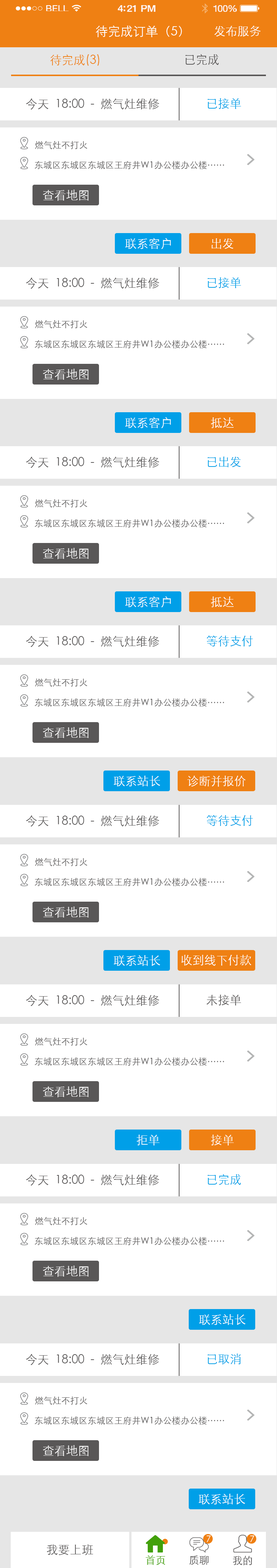
<style>
.page{position:relative;width:277px;height:1568px;background:#ffffff}
.page>*{position:absolute;margin:0}
.t1{font:8.6px "HelveticaNeue";letter-spacing:0.02em;color:#ffffff;scale:1.06 1}
.t2{font:9.3px "HelveticaNeue-Medium";letter-spacing:-0.02em;color:#ffffff;scale:1.06 1}
.t3{font:9px "HelveticaNeue";letter-spacing:-0.02em;color:#ffffff;scale:1.06 1}
.t4{font:12.6px "STXihei";color:#ffffff}
.t5{font:11.8px "STXihei";color:#ffffff}
.t6{font:11.8px "STXihei";color:#595757}
.t7{font:11.8px "STXihei";color:#ef8014}
.t8{font:11.8px "STXihei";color:#009fe8}
.t9{font:8.9px "STXihei";color:#595757}
.t10{font:8.9px "STXihei";color:#ffffff}
.t11{font:10.3px "STXihei";color:#42a00a}
.t12{font:10.3px "STXihei";color:#595757}
</style>
<div class="page">
<p class="t1" style="left:46px;top:5px;width:23px;height:6px">BELL</p>
<p class="t2" style="left:118px;top:5px;width:38px;height:7px">4:21 PM</p>
<p class="t3" style="left:213px;top:5px;width:24px;height:7px">100%</p>
<p class="t4" style="left:96px;top:25px;width:86px;height:12px">待完成订单（5）</p>
<p class="t5" style="left:214px;top:25px;width:47px;height:12px">发布服务</p>
<p class="t6" style="left:185px;top:54px;width:34px;height:11px">已完成</p>
<p class="t7" style="left:50px;top:54px;width:49px;height:12px">待完成(3)</p>
<p class="t6" style="left:26px;top:98px;width:133px;height:12px">今天  18:00  -  燃气灶维修</p>
<p class="t8" style="left:208px;top:98px;width:33px;height:11px">已接单</p>
<p class="t9" style="left:35px;top:141px;width:52px;height:8px">燃气灶不打火</p>
<p class="t9" style="left:35px;top:161px;width:189px;height:8px">东城区东城区东城区王府井W1办公楼办公楼……</p>
<p class="t5" style="left:43px;top:189px;width:46px;height:12px">查看地图</p>
<p class="t5" style="left:125px;top:238px;width:46px;height:11px">联系客户</p>
<p class="t5" style="left:212px;top:238px;width:21px;height:11px">出发</p>
<p class="t6" style="left:26px;top:277px;width:133px;height:12px">今天  18:00  -  燃气灶维修</p>
<p class="t8" style="left:208px;top:277px;width:33px;height:11px">已接单</p>
<p class="t9" style="left:35px;top:320px;width:52px;height:8px">燃气灶不打火</p>
<p class="t9" style="left:35px;top:340px;width:189px;height:8px">东城区东城区东城区王府井W1办公楼办公楼……</p>
<p class="t5" style="left:43px;top:369px;width:46px;height:11px">查看地图</p>
<p class="t5" style="left:125px;top:417px;width:46px;height:11px">联系客户</p>
<p class="t5" style="left:211px;top:417px;width:23px;height:11px">抵达</p>
<p class="t6" style="left:26px;top:457px;width:133px;height:11px">今天  18:00  -  燃气灶维修</p>
<p class="t8" style="left:208px;top:457px;width:33px;height:10px">已出发</p>
<p class="t9" style="left:35px;top:499px;width:52px;height:9px">燃气灶不打火</p>
<p class="t9" style="left:35px;top:519px;width:189px;height:8px">东城区东城区东城区王府井W1办公楼办公楼……</p>
<p class="t5" style="left:43px;top:548px;width:46px;height:11px">查看地图</p>
<p class="t5" style="left:125px;top:596px;width:46px;height:12px">联系客户</p>
<p class="t5" style="left:211px;top:597px;width:23px;height:10px">抵达</p>
<p class="t6" style="left:26px;top:636px;width:133px;height:11px">今天  18:00  -  燃气灶维修</p>
<p class="t8" style="left:206px;top:635px;width:47px;height:11px">等待支付</p>
<p class="t9" style="left:35px;top:678px;width:52px;height:9px">燃气灶不打火</p>
<p class="t9" style="left:35px;top:698px;width:189px;height:9px">东城区东城区东城区王府井W1办公楼办公楼……</p>
<p class="t5" style="left:43px;top:727px;width:46px;height:11px">查看地图</p>
<p class="t5" style="left:114px;top:776px;width:46px;height:10px">联系站长</p>
<p class="t5" style="left:187px;top:776px;width:59px;height:11px">诊断并报价</p>
<p class="t6" style="left:26px;top:815px;width:133px;height:12px">今天  18:00  -  燃气灶维修</p>
<p class="t8" style="left:206px;top:815px;width:47px;height:11px">等待支付</p>
<p class="t9" style="left:35px;top:858px;width:52px;height:8px">燃气灶不打火</p>
<p class="t9" style="left:35px;top:878px;width:189px;height:8px">东城区东城区东城区王府井W1办公楼办公楼……</p>
<p class="t5" style="left:43px;top:906px;width:46px;height:12px">查看地图</p>
<p class="t5" style="left:114px;top:955px;width:46px;height:11px">联系站长</p>
<p class="t5" style="left:181px;top:955px;width:71px;height:11px">收到线下付款</p>
<p class="t6" style="left:26px;top:995px;width:133px;height:11px">今天  18:00  -  燃气灶维修</p>
<p class="t6" style="left:206px;top:995px;width:35px;height:10px">未接单</p>
<p class="t9" style="left:35px;top:1037px;width:52px;height:9px">燃气灶不打火</p>
<p class="t9" style="left:35px;top:1057px;width:189px;height:9px">东城区东城区东城区王府井W1办公楼办公楼……</p>
<p class="t5" style="left:43px;top:1086px;width:46px;height:11px">查看地图</p>
<p class="t5" style="left:137px;top:1134px;width:23px;height:11px">拒单</p>
<p class="t5" style="left:211px;top:1135px;width:23px;height:10px">接单</p>
<p class="t6" style="left:26px;top:1174px;width:133px;height:12px">今天  18:00  -  燃气灶维修</p>
<p class="t8" style="left:208px;top:1174px;width:33px;height:11px">已完成</p>
<p class="t9" style="left:35px;top:1217px;width:52px;height:8px">燃气灶不打火</p>
<p class="t9" style="left:35px;top:1237px;width:189px;height:8px">东城区东城区东城区王府井W1办公楼办公楼……</p>
<p class="t5" style="left:43px;top:1265px;width:46px;height:12px">查看地图</p>
<p class="t5" style="left:199px;top:1314px;width:47px;height:11px">联系站长</p>
<p class="t6" style="left:26px;top:1354px;width:133px;height:11px">今天  18:00  -  燃气灶维修</p>
<p class="t8" style="left:208px;top:1353px;width:33px;height:11px">已取消</p>
<p class="t9" style="left:35px;top:1396px;width:52px;height:9px">燃气灶不打火</p>
<p class="t9" style="left:35px;top:1416px;width:189px;height:9px">东城区东城区东城区王府井W1办公楼办公楼……</p>
<p class="t5" style="left:43px;top:1445px;width:46px;height:11px">查看地图</p>
<p class="t5" style="left:199px;top:1494px;width:46px;height:10px">联系站长</p>
<p class="t10" style="left:206px;top:1535px;width:5px;height:7px">7</p>
<p class="t10" style="left:250px;top:1535px;width:4px;height:7px">7</p>
<p class="t6" style="left:47px;top:1544px;width:46px;height:11px">我要上班</p>
<p class="t11" style="left:146px;top:1555px;width:19px;height:10px">首页</p>
<p class="t12" style="left:189px;top:1555px;width:20px;height:10px">质聊</p>
<p class="t12" style="left:233px;top:1556px;width:19px;height:9px">我的</p>
</div>
